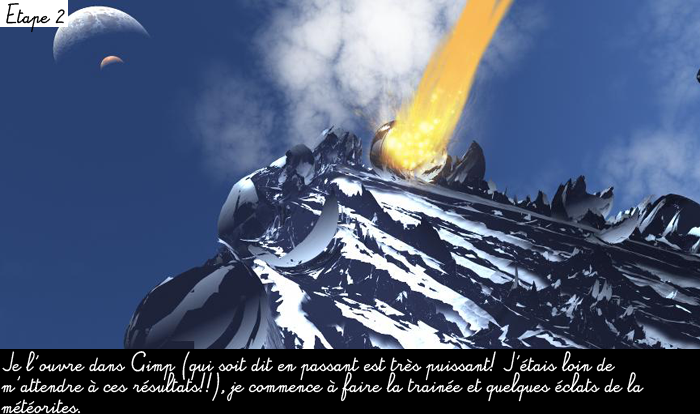
<style>
.page{position:relative;width:700px;height:414px}
.page>*{position:absolute;margin:0}
.t1{font:13.3px/27.3px "Alamain";color:#000000}
.t2{font:13.3px/21.3px "Alamain";color:#ffffff}
</style>
<div class="page">
<p class="t1" style="left:6px;top:3px;width:59px;height:30px">Etape 2</p>
<p class="t2" style="left:1px;top:351px;width:643px;height:63px">Je l'ouvre dans Gimp (qui soit dit en passant est très puissant! J'étais loin de <br>m'attendre à ces résultats!!), je commence à faire la trainée et quelques éclats de la <br>météorites.</p>
</div>
